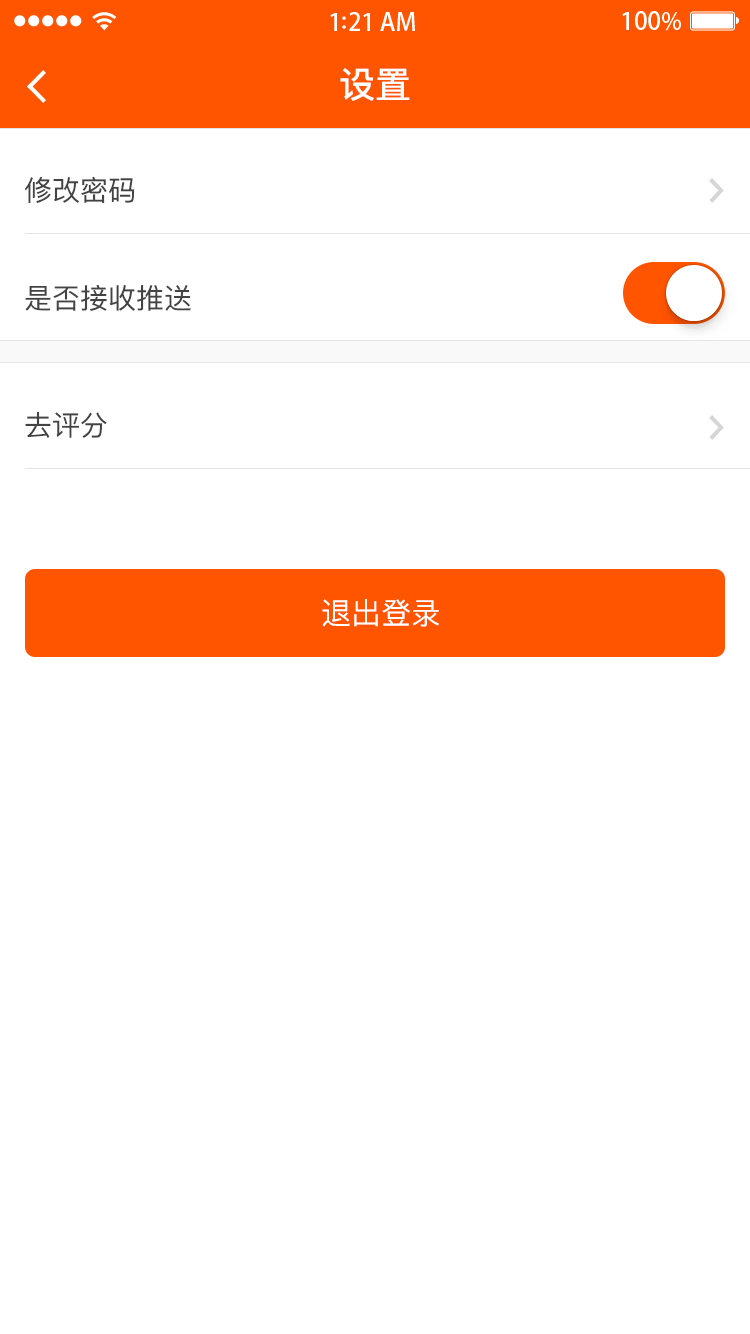
<style>
.page{position:relative;width:750px;height:1334px;background:#ffffff}
.page>*{position:absolute;margin:0}
.t1{font:36px "PingFangSC-Medium";letter-spacing:0.02em;color:#ffffff}
.t2{font:28px "PingFangSC-Regular";color:#434343}
.t3{font:30px "PingFangSC-Regular";color:#ffffff;text-transform:uppercase}
</style>
<div class="page">
<p class="t1" style="left:340px;top:68px;width:70px;height:33px">设置</p>
<p class="t2" style="left:25px;top:177px;width:110px;height:26px">修改密码</p>
<p class="t2" style="left:25px;top:285px;width:166px;height:26px">是否接收推送</p>
<p class="t2" style="left:25px;top:412px;width:82px;height:26px">去评分</p>
<p class="t3" style="left:322px;top:599px;width:117px;height:28px">退出登录</p>
</div>
